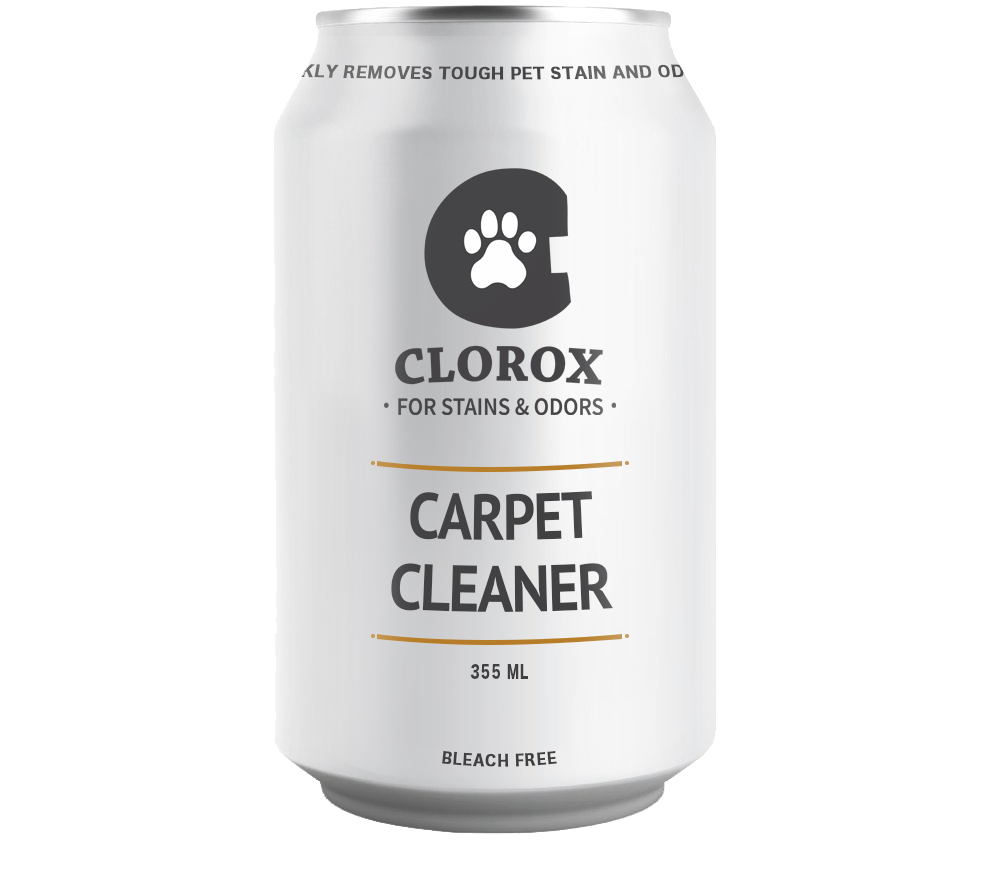
<style>
.page{position:relative;width:1000px;height:878px;background:#ffffff}
.page>*{position:absolute;margin:0}
.t1{font:16px "HiraKakuStdN-W8";letter-spacing:0.025em;text-transform:uppercase;scale:0.94 1}
.t2{font:65px/72px "PTSans-Bold";letter-spacing:-0.025em;color:#3b3a3c;scale:0.85 1}
.t3{font:17px "HiraKakuStdN-W8";letter-spacing:0.1em;color:#3b3a3c;text-transform:uppercase;scale:0.7 1}
.t4{font:16px "HiraKakuStdN-W8";letter-spacing:0.075em;color:#3b3a3c;text-transform:uppercase;scale:0.8 1}
</style>
<div class="page">
<p class="t1" style="left:256px;top:63px;width:479px;height:17px">QUICKLY REMOVES TOUGH PET STAIN AND ODDORS</p>
<p class="t2" style="left:391px;top:491px;width:222px;height:121px;text-align:center">CARPET<br>CLEANER</p>
<p class="t3" style="left:470px;top:664px;width:59px;height:15px">355 ml</p>
<p class="t4" style="left:442px;top:750px;width:115px;height:17px">bleach free</p>
</div>
